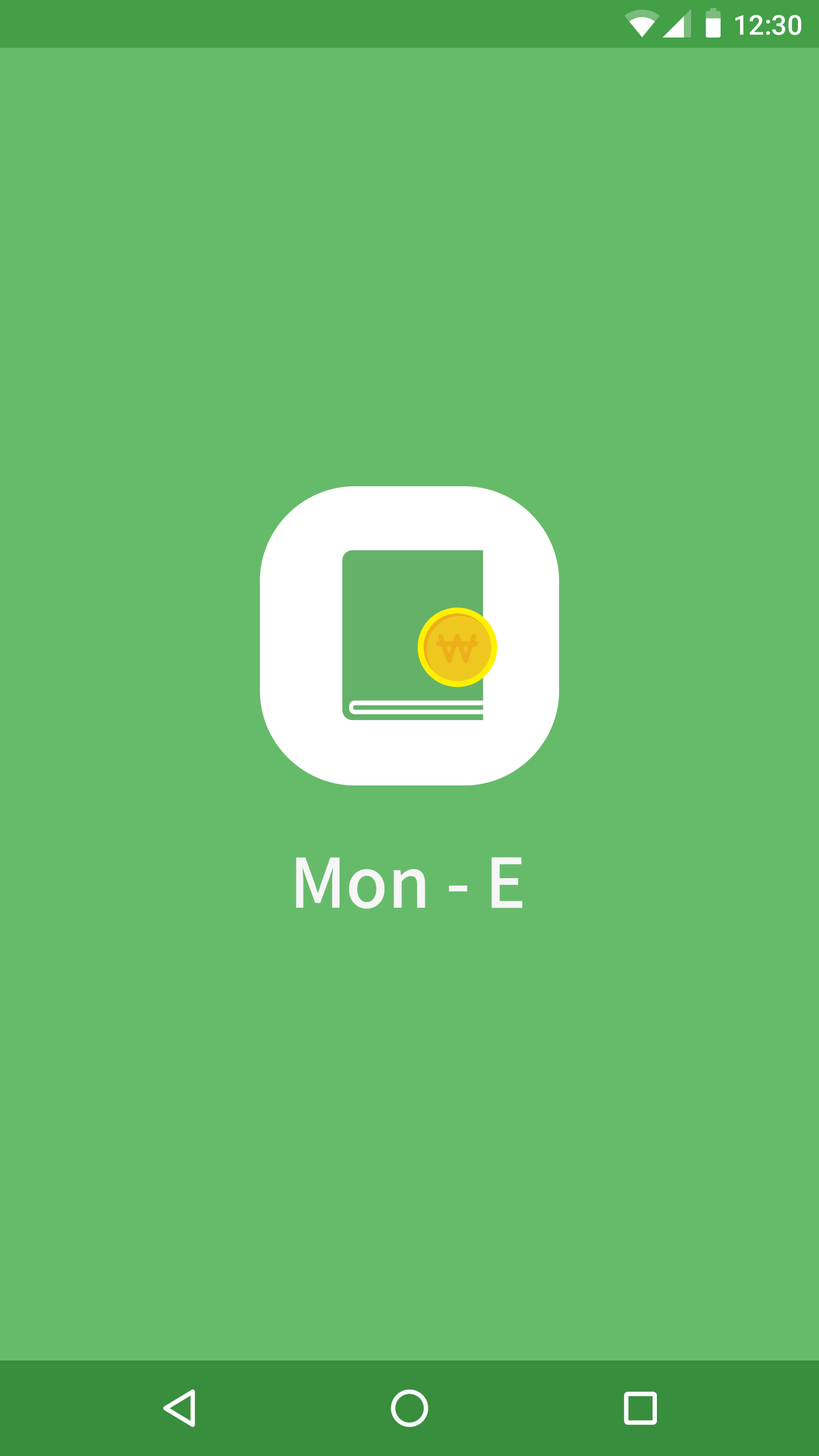
<style>
.page{position:relative;width:819px;height:1456px;background:#66bb6a}
.page>*{position:absolute;margin:0}
.t1{font:27.3px "Roboto-Medium";color:#ffffff}
.t2{font:68.2px "NotoSansCJKkr-Medium";color:#f6f6f6}
</style>
<div class="page">
<p class="t1" style="left:735px;top:15px;width:66px;height:20px">12:30</p>
<p class="t2" style="left:296px;top:857px;width:227px;height:52px">Mon - E</p>
</div>
